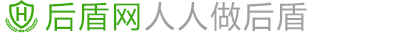
<style>
.page{position:relative;width:398px;height:33px;background:#ffffff}
.page>*{position:absolute;margin:0}
.t1{font:30.6px "MicrosoftYaHei";letter-spacing:0.08em;color:#a0a0a0}
.t2{font:30.6px "MicrosoftYaHei";letter-spacing:0.08em;color:#3caa0d}
</style>
<div class="page">
<p class="t1" style="left:45px;top:1px;width:262px;height:31px"><span class="t2">后盾网</span>人人做后盾</p>
</div>
